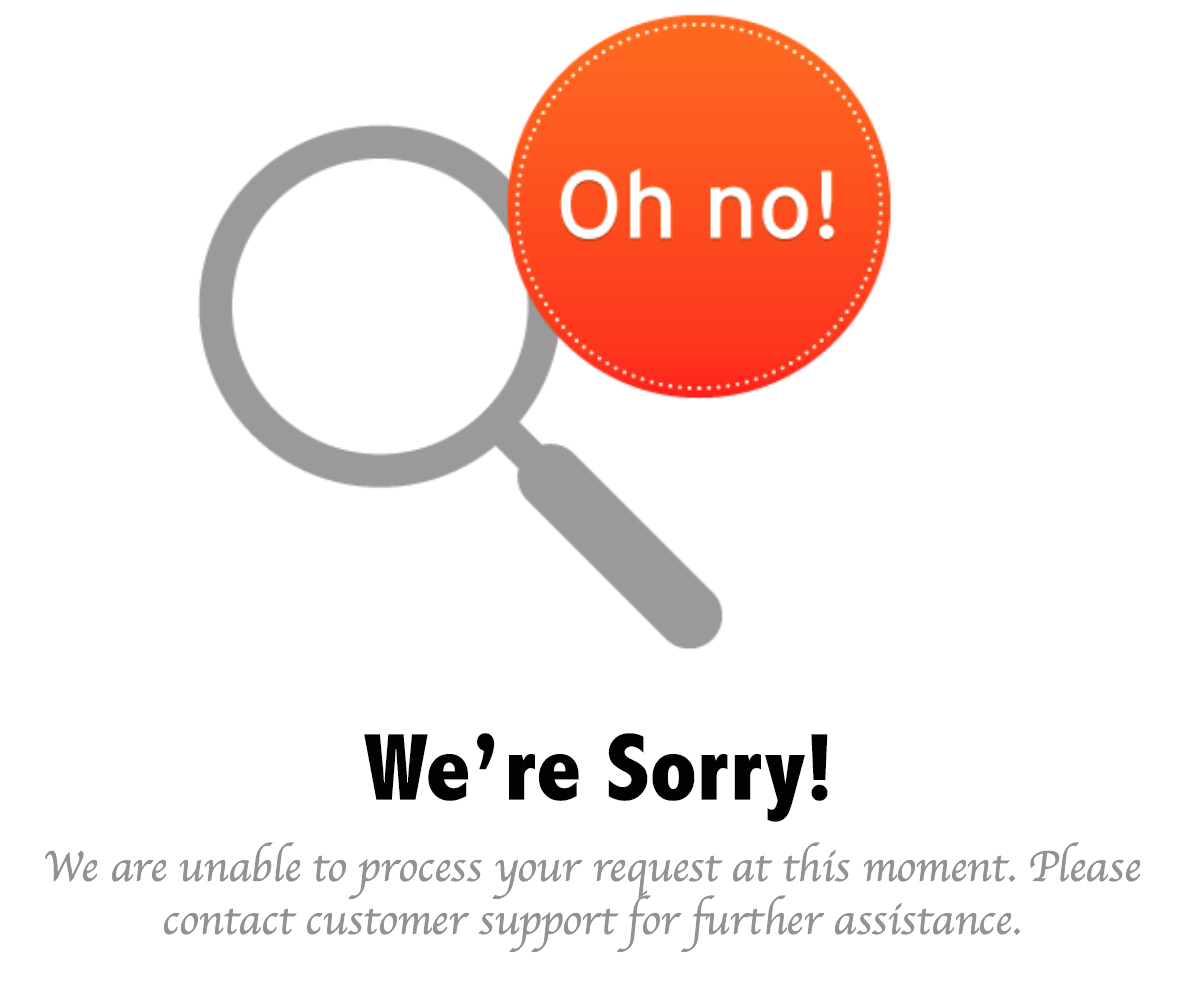
<style>
.page{position:relative;width:1192px;height:990px;background:#ffffff}
.page>*{position:absolute;margin:0}
.t1{font:96px "AbadiMT-CondensedExtraBold";color:#020202}
.t2{font:44px "Apple-Chancery";color:#909293}
</style>
<div class="page">
<p class="t1" style="left:364px;top:733px;width:464px;height:89px">We’re Sorry!</p>
<p class="t2" style="left:45px;top:842px;width:1096px;height:111px;text-align:center">We are unable to process your request at this moment. Please contact customer support for further assistance.</p>
</div>
